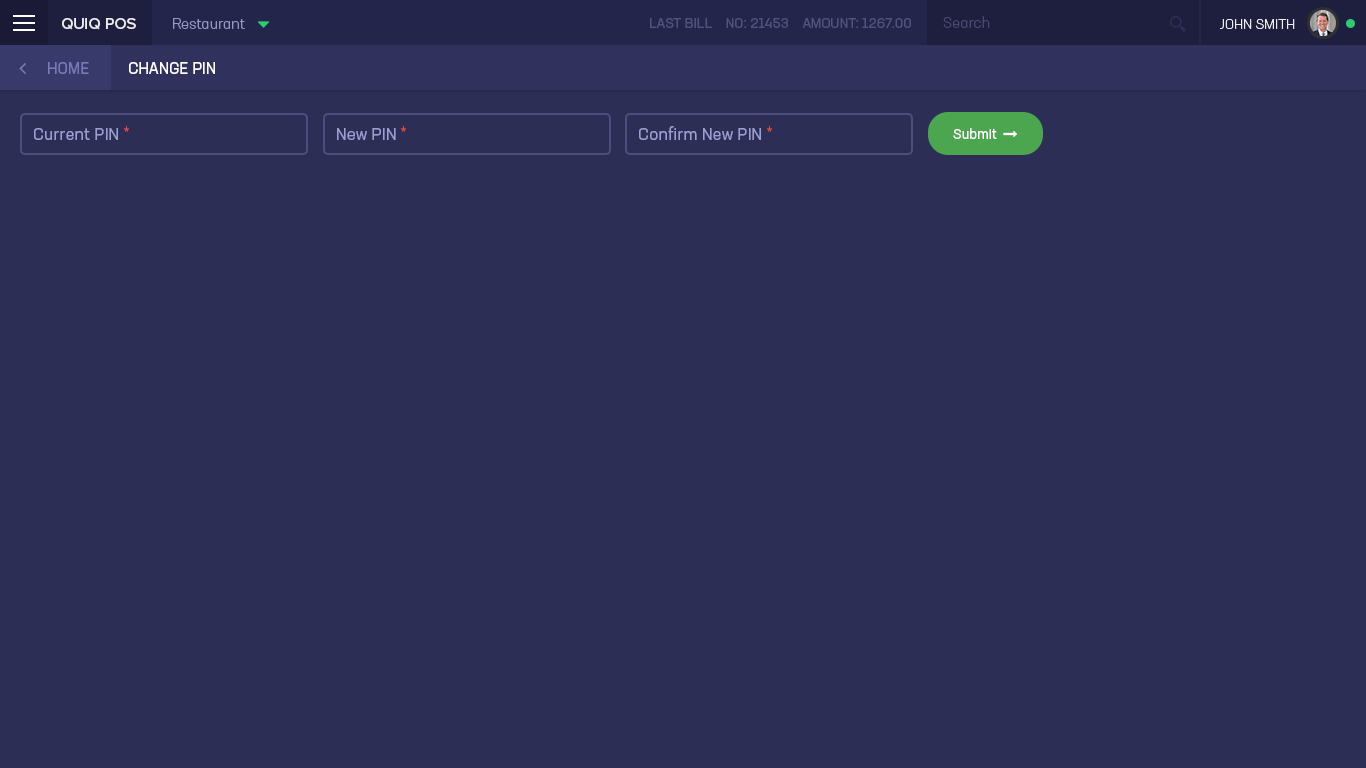
<style>
.page{position:relative;width:1366px;height:768px;background:#2c2e56}
.page>*{position:absolute;margin:0}
.t1{font:15px "NeusaNextStd-Light";color:#474975}
.t2{font:16px "ProximaNova-Medium";color:#ededed}
.t3{font:15px "NeusaNextStd-Light";color:#9597c4}
.t4{font:14px "NeusaNextStd-Regular";color:#50537d;text-transform:uppercase}
.t5{font:14px "NeusaNextStd-Light";color:#ededed;text-transform:uppercase}
.t6{font:16px "NeusaNextStd-Regular";color:#767ab5;text-transform:uppercase}
.t7{font:16px "NeusaNextStd-Regular";color:#ffffff;text-transform:uppercase}
.t8{font:17px "NeusaNextStd-Regular";color:#9c9fd1}
.t9{font:17px "NeusaNextStd-Regular";color:#e74c3c}
</style>
<div class="page">
<p class="t1" style="left:943px;top:16px;width:47px;height:12px">Search</p>
<p class="t2" style="left:62px;top:18px;width:74px;height:12px">QUIQ POS</p>
<p class="t3" style="left:173px;top:18px;width:72px;height:11px">Restaurant</p>
<p class="t4" style="left:650px;top:18px;width:261px;height:10px">Last Bill    NO: 21453    Amount: 1267.00</p>
<p class="t5" style="left:1220px;top:19px;width:75px;height:10px">John Smith</p>
<p class="t6" style="left:48px;top:62px;width:41px;height:12px">Home</p>
<p class="t7" style="left:129px;top:62px;width:86px;height:12px">Change Pin</p>
<p class="t8" style="left:34px;top:126px;width:95px;height:14px">Current PIN <span class="t9">*</span></p>
<p class="t8" style="left:337px;top:126px;width:69px;height:14px">New PIN <span class="t9">*</span></p>
<p class="t8" style="left:639px;top:126px;width:133px;height:14px">Confirm New PIN <span class="t9">*</span></p>
</div>
